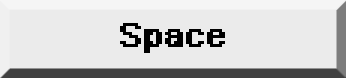
<style>
.page{position:relative;width:346px;height:78px;background:#ebebeb}
.page>*{position:absolute;margin:0}
.t1{font:24px "PixelArial11Bold";color:#000000}
</style>
<div class="page">
<p class="t1" style="left:120px;top:23px;width:105px;height:30px">Space</p>
</div>
